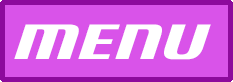
<style>
.page{position:relative;width:233px;height:82px;background:#d953e9}
.page>*{position:absolute;margin:0}
.t1{font:56.4px "Motorwerk";color:#ffffff}
</style>
<div class="page">
<p class="t1" style="left:14px;top:24px;width:197px;height:36px">Menu</p>
</div>
